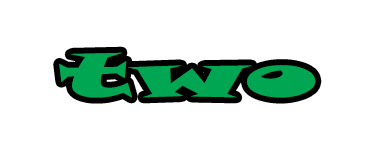
<style>
.page{position:relative;width:380px;height:161px;background:#ffffff}
.page>*{position:absolute;margin:0}
.t1{font:60px "SnapITC-Regular";color:#00a651;scale:2 1}
</style>
<div class="page">
<p class="t1" style="left:59px;top:52px;width:257px;height:46px">two</p>
</div>
